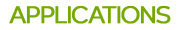
<style>
.page{position:relative;width:180px;height:30px;background:#ffffff}
.page>*{position:absolute;margin:0}
.t1{font:24px "Typold-New";letter-spacing:-0.1em;color:#76a900;text-transform:uppercase;font-weight:bold}
</style>
<div class="page">
<p class="t1" style="left:9px;top:5px;width:162px;height:19px">Applications</p>
</div>
